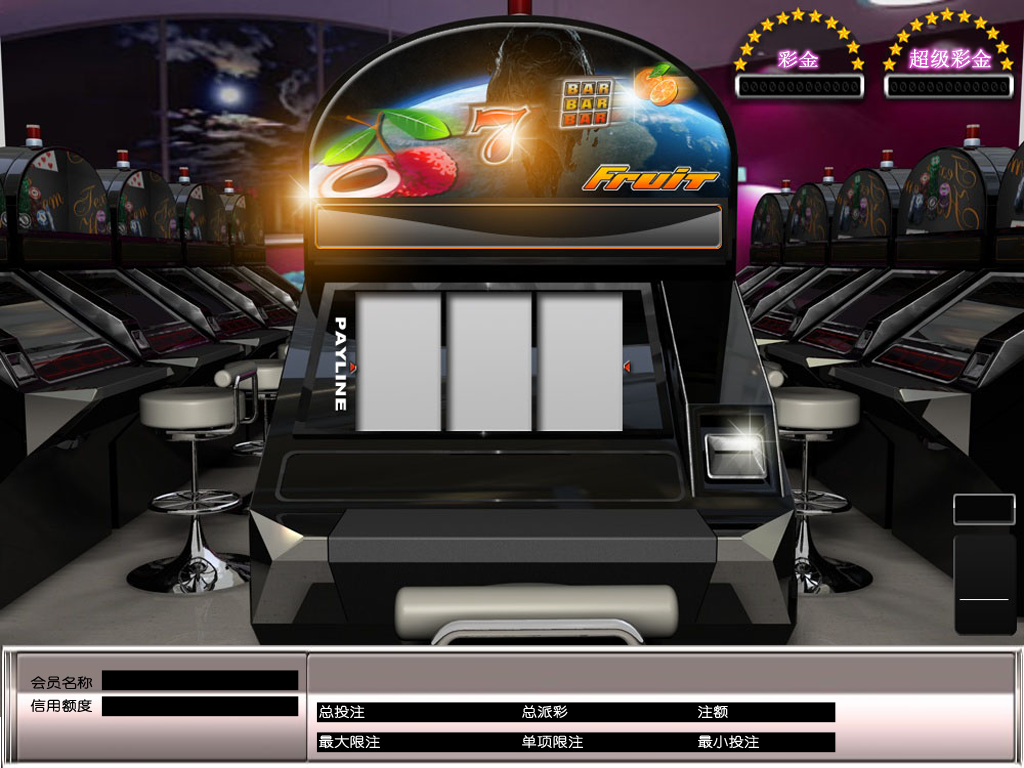
<style>
.page{position:relative;width:1024px;height:768px}
.page>*{position:absolute;margin:0}
.t1{font:17.8px "SimSun";color:#ffffff;font-weight:bold;scale:1.14 1}
.t2{font:20.2px "SimSun";color:#ffffff;font-weight:bold}
.t3{font:13.3px "YouYuan";color:#000000;font-weight:bold;scale:1.14 1}
.t4{font:13.3px "YouYuan";color:#fffefe;font-weight:bold;scale:1.14 1}
</style>
<div class="page">
<p class="t1" style="left:778px;top:51px;width:40px;height:17px">彩金</p>
<p class="t2" style="left:909px;top:49px;width:82px;height:19px">超级彩金</p>
<p class="t3" style="left:30px;top:676px;width:63px;height:14px">会员名称</p>
<p class="t3" style="left:30px;top:699px;width:62px;height:13px">信用额度</p>
<p class="t4" style="left:319px;top:705px;width:46px;height:14px">总投注</p>
<p class="t4" style="left:522px;top:705px;width:46px;height:13px">总派彩</p>
<p class="t4" style="left:698px;top:705px;width:30px;height:13px">注额</p>
<p class="t4" style="left:319px;top:735px;width:61px;height:14px">最大限注</p>
<p class="t4" style="left:522px;top:735px;width:61px;height:14px">单项限注</p>
<p class="t4" style="left:698px;top:735px;width:61px;height:14px">最小投注</p>
</div>
